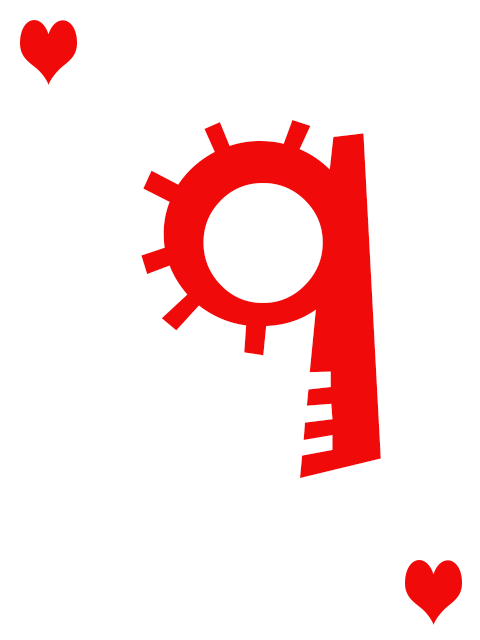
<style>
.page{position:relative;width:480px;height:640px;background:#ffffff}
.page>*{position:absolute;margin:0}
.t1{font:386.3px "Jokerman-Regular";color:#f10a0a}
</style>
<div class="page">
<p class="t1" style="left:141px;top:120px;width:240px;height:358px">9</p>
</div>
